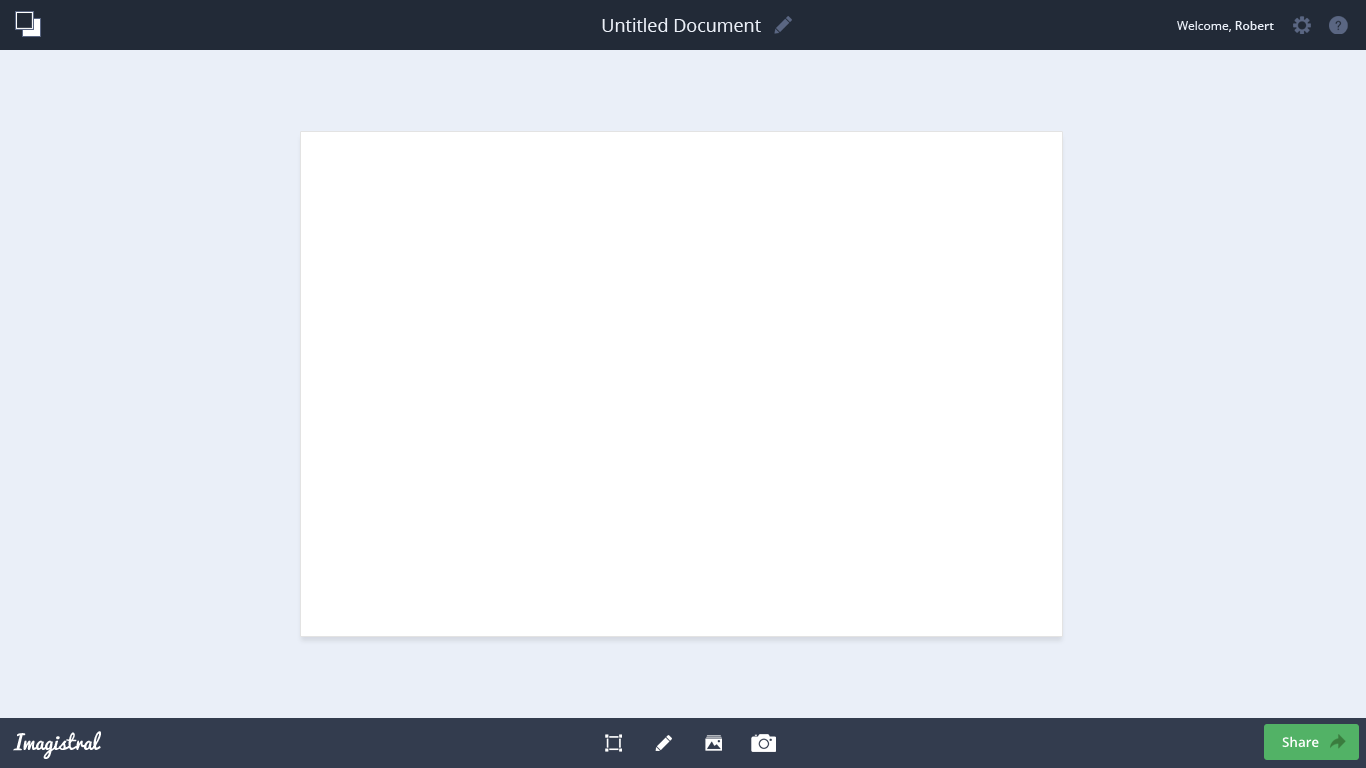
<style>
.page{position:relative;width:1366px;height:768px;background:#eaeff8}
.page>*{position:absolute;margin:0}
.t1{font:18px "OpenSans";color:#eaeff8}
.t2{font:12px "OpenSans";color:#eaeff8}
.t3{font:12px "OpenSans-Semibold";color:#eaeff8}
.t4{font:20px "Pacifico-Regular";color:#ffffff}
</style>
<div class="page">
<p class="t1" style="left:602px;top:18px;width:159px;height:14px">Untitled Document</p>
<p class="t2" style="left:1177px;top:21px;width:97px;height:11px">Welcome,<span class="t3"> Robert</span></p>
<p class="t4" style="left:13px;top:731px;width:88px;height:28px">Imagistral</p>
</div>
